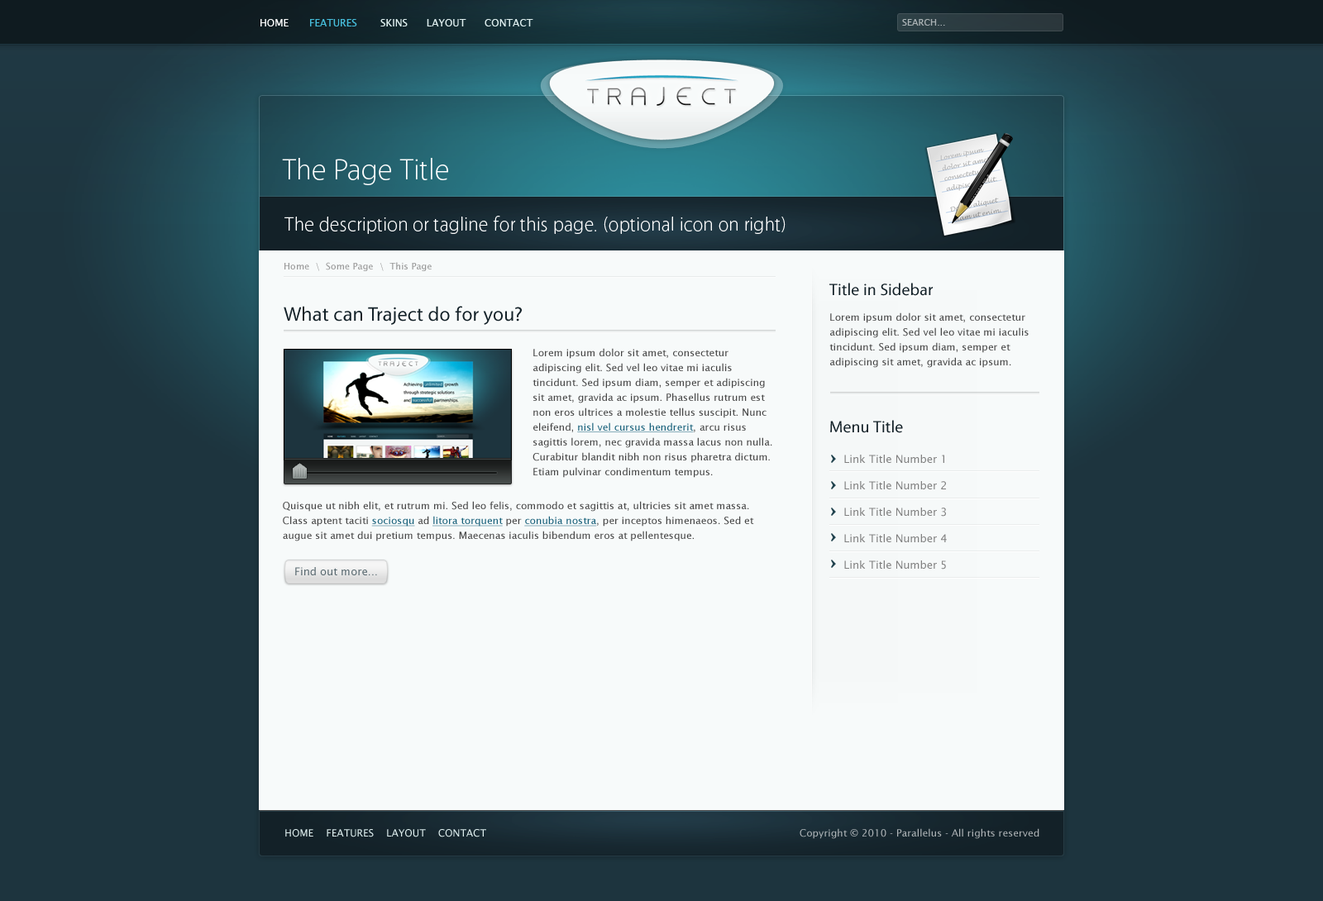
<style>
.page{position:relative;width:1323px;height:901px;background:#1d343e}
.page>*{position:absolute;margin:0}
.t1{font:9.9px "LucidaSansUnicode";color:#ffffff;text-transform:uppercase}
.t2{font:9.9px "LucidaSansUnicode";color:#46bddb;text-transform:uppercase}
.t3{font:9.9px "LucidaSansUnicode";color:#deeeee;text-transform:uppercase}
.t4{font:9.1px "LucidaSansUnicode";color:#aab2b4;text-transform:uppercase}
.t5{font:29.8px "Vegur-Light";color:#ffffff}
.t6{font:19.8px "Vegur-Light";color:#ffffff}
.t7{font:9.1px "LucidaSansUnicode";color:#999999}
.t8{font:16.5px "Vegur-Regular";color:#132128}
.t9{font:19.8px "Vegur-Regular";color:#132128}
.t10{font:9.9px/14.9px "LucidaSans";color:#474747}
.t11{font:9.9px/14.9px "LucidaSans";color:#17607a;text-decoration:underline}
.t12{font:10.7px/26.5px "LucidaSansUnicode";color:#808080}
.t13{font:10.7px "LucidaSans";color:#5a6a71}
.t14{font:9.9px "LucidaSans";color:#adb3b5}
</style>
<div class="page">
<p class="t1" style="left:260px;top:19px;width:29px;height:7px">Home</p>
<p class="t2" style="left:310px;top:19px;width:47px;height:7px">Features</p>
<p class="t3" style="left:380px;top:19px;width:153px;height:7px">Skins      Layout      Contact</p>
<p class="t4" style="left:902px;top:19px;width:43px;height:7px">Search...</p>
<p class="t5" style="left:282px;top:158px;width:166px;height:27px">The Page Title</p>
<p class="t6" style="left:284px;top:216px;width:502px;height:18px">The description or tagline for this page. (optional icon on right)</p>
<p class="t7" style="left:284px;top:262px;width:148px;height:9px">Home  \  Some Page  \  This Page</p>
<p class="t8" style="left:829px;top:283px;width:104px;height:13px">Title in Sidebar</p>
<p class="t9" style="left:284px;top:306px;width:238px;height:19px">What can Traject do for you?</p>
<p class="t10" style="left:829px;top:313px;width:200px;height:55px">Lorem ipsum dolor sit amet, consectetur adipiscing elit. Sed vel leo vitae mi iaculis tincidunt. Sed ipsum diam, semper et adipiscing sit amet, gravida ac ipsum.</p>
<p class="t10" style="left:533px;top:348px;width:239px;height:130px">Lorem ipsum dolor sit amet, consectetur adipiscing elit. Sed vel leo vitae mi iaculis tincidunt. Sed ipsum diam, semper et adipiscing sit amet, gravida ac ipsum. Phasellus rutrum est non eros ultrices a molestie tellus suscipit. Nunc eleifend, <span class="t11">nisl vel cursus hendrerit</span>, arcu risus sagittis lorem, nec gravida massa lacus non nulla. Curabitur blandit nibh non risus pharetra dictum. Etiam pulvinar condimentum tempus.</p>
<p class="t8" style="left:830px;top:420px;width:73px;height:13px">Menu Title</p>
<p class="t12" style="left:844px;top:455px;width:103px;height:115px">Link Title Number 1<br>Link Title Number 2<br>Link Title Number 3<br>Link Title Number 4<br>Link Title Number 5</p>
<p class="t10" style="left:283px;top:501px;width:471px;height:41px">Quisque ut nibh elit, et rutrum mi. Sed leo felis, commodo et sagittis at, ultricies sit amet massa. Class aptent taciti <span class="t11">sociosqu</span> ad <span class="t11">litora torquent </span>per <span class="t11">conubia nostra</span>, per inceptos himenaeos. Sed et augue sit amet dui pretium tempus. Maecenas iaculis bibendum eros at pellentesque.</p>
<p class="t13" style="left:295px;top:567px;width:82px;height:9px">Find out more...</p>
<p class="t3" style="left:285px;top:829px;width:201px;height:9px">Home    Features    layout    Contact</p>
<p class="t14" style="left:800px;top:829px;width:239px;height:10px">Copyright © 2010 - Parallelus - All rights reserved</p>
</div>
